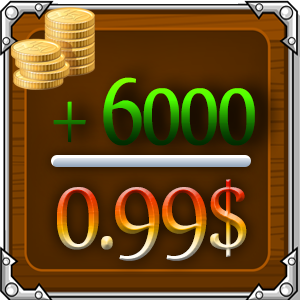
<style>
.page{position:relative;width:300px;height:300px}
.page>*{position:absolute;margin:0}
.t1{font:114.3px "Nyala-Regular";letter-spacing:-0.05em;scale:0.78 1}
.t2{font:123.9px "Nyala-Regular";letter-spacing:-0.05em;scale:0.85 1}
</style>
<div class="page">
<p class="t1" style="left:53px;top:77px;width:202px;height:69px">+ 6000</p>
<p class="t2" style="left:57px;top:179px;width:190px;height:82px">0.99$</p>
</div>
